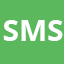
<style>
.page{position:relative;width:64px;height:64px;background:#5cb85c}
.page>*{position:absolute;margin:0}
.t1{font:30px "OpenSans-Bold";color:#ffffff}
</style>
<div class="page">
<p class="t1" style="left:3px;top:20px;width:60px;height:21px">SMS</p>
</div>
